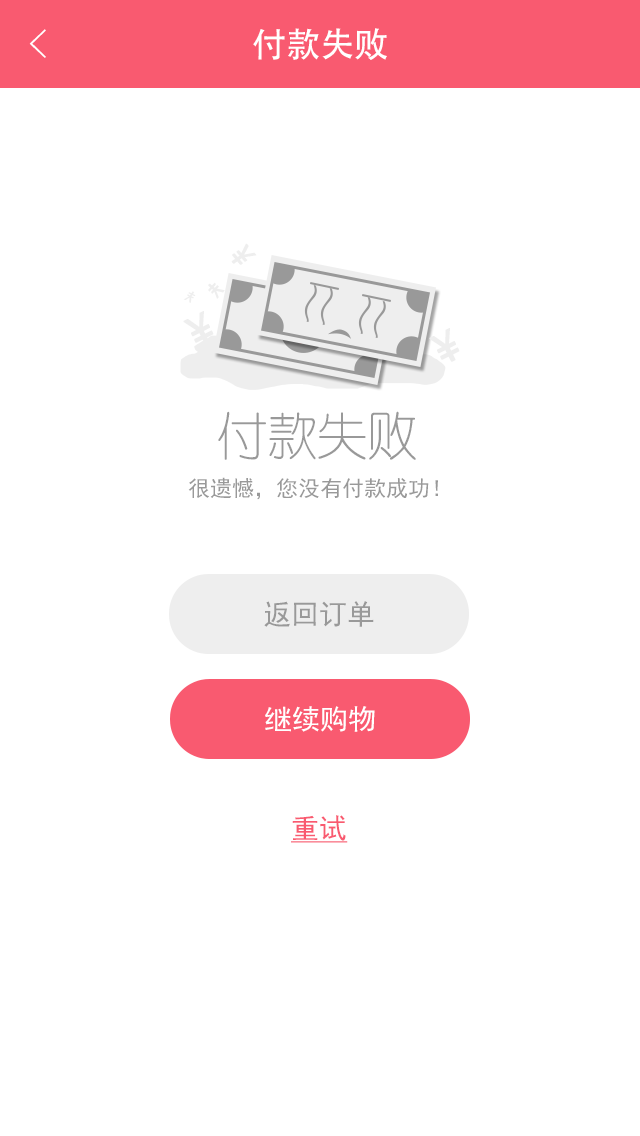
<style>
.page{position:relative;width:640px;height:1136px;background:#ffffff}
.page>*{position:absolute;margin:0}
.t1{font:40px "FZYXJW--GB1-0";color:#ffffff}
.t2{font:34px "AdobeHeitiStd-Regular";color:#ffffff}
.t3{font:30px "MicrosoftYaHei";color:#eeeeee;font-weight:bold;scale:0.9 1}
.t4{font:14.6px "MicrosoftYaHei";color:#eeeeee;font-weight:bold;scale:0.94 1}
.t5{font:20.4px "MicrosoftYaHei";color:#eeeeee;font-weight:bold;scale:0.96 1}
.t6{font:40px "MicrosoftYaHei";color:#eeeeee;font-weight:bold}
.t7{font:50px "FZY1JW--GB1-0";color:#999999}
.t8{font:22px "SimHei";color:#999999}
.t9{font:28px "SimHei";color:#999999}
.t10{font:28px "SimHei";color:#ffffff}
.t11{font:28px "SimHei";color:#f95a70;text-decoration:underline}
</style>
<div class="page">
<p class="t1" style="left:29px;top:29px;width:17px;height:29px">&lt;</p>
<p class="t2" style="left:253px;top:28px;width:134px;height:32px">付款失败</p>
<p class="t3" style="left:231px;top:243px;width:26px;height:22px;rotate:50deg">￥</p>
<p class="t4" style="left:183px;top:291px;width:13px;height:12px;rotate:-153deg">￥</p>
<p class="t5" style="left:208px;top:282px;width:17px;height:17px;rotate:132deg">￥</p>
<p class="t6" style="left:183px;top:311px;width:31px;height:34px;rotate:-27deg">￥</p>
<p class="t6" style="left:429px;top:328px;width:31px;height:34px;rotate:-27deg">￥</p>
<p class="t7" style="left:218px;top:411px;width:198px;height:49px">付款失败</p>
<p class="t8" style="left:188px;top:477px;width:250px;height:23px">很遗憾，您没有付款成功！</p>
<p class="t9" style="left:264px;top:601px;width:110px;height:26px">返回订单</p>
<p class="t10" style="left:265px;top:706px;width:110px;height:26px">继续购物</p>
<p class="t11" style="left:291px;top:815px;width:57px;height:28px">重试</p>
</div>
